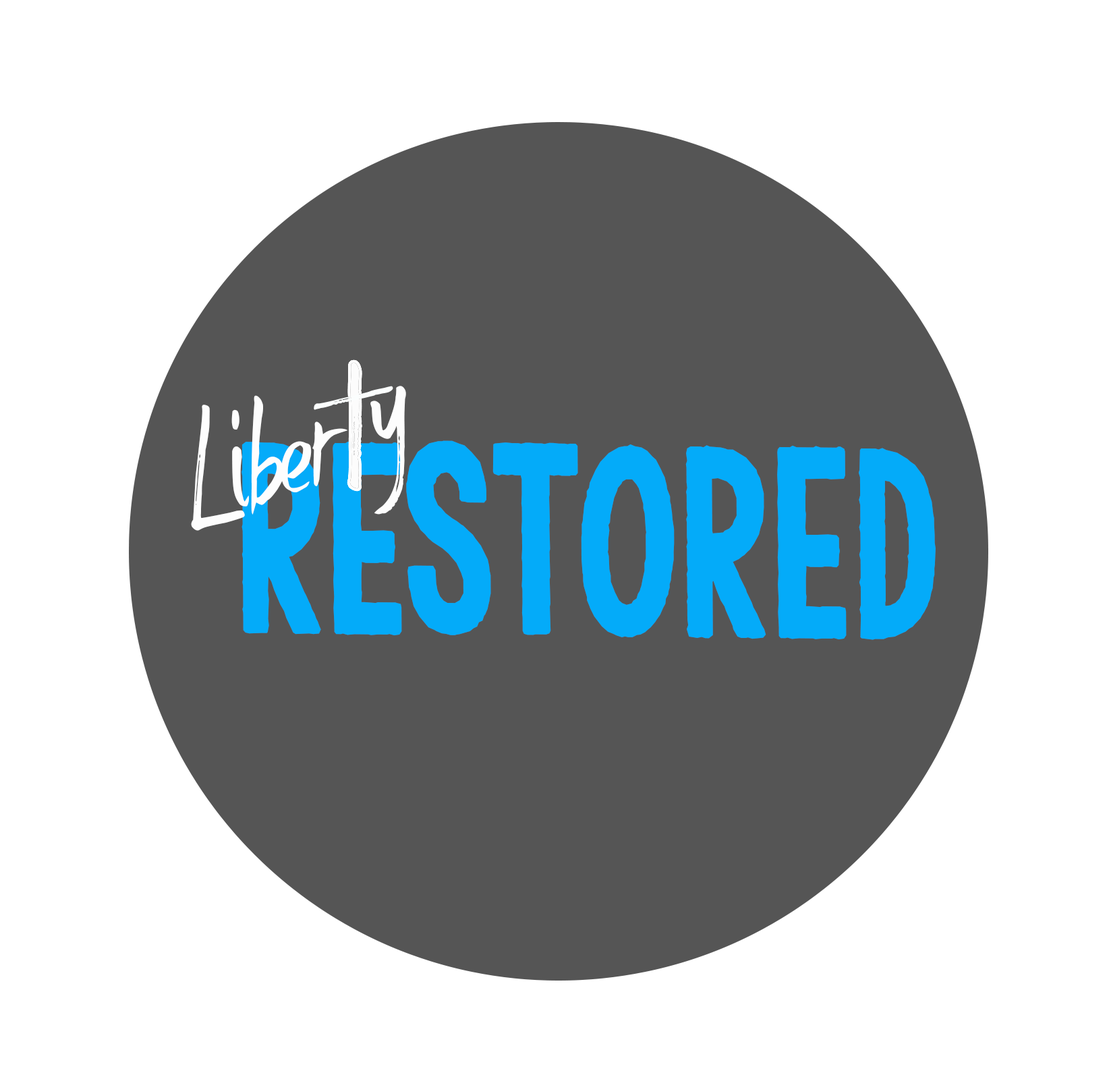
<style>
.page{position:relative;width:1107px;height:1077px;background:#ffffff}
.page>*{position:absolute;margin:0}
.t1{font:171.3px "JustWriteDT";color:#fdfdfd}
.t2{font:102.8px "JustWriteDT";color:#fbfefe}
.t3{font:292.5px "KGTangledUpInYou2";letter-spacing:0.006em;color:#04abf9;scale:0.85 1}
</style>
<div class="page">
<p class="t1" style="left:191px;top:386px;width:215px;height:145px;rotate:-13deg">Liber y</p>
<p class="t2" style="left:314px;top:386px;width:79px;height:24px;rotate:62deg">I</p>
<p class="t2" style="left:314px;top:386px;width:79px;height:24px;rotate:62deg">I</p>
<p class="t3" style="left:241px;top:440px;width:695px;height:200px;rotate:1deg">Restored</p>
</div>
